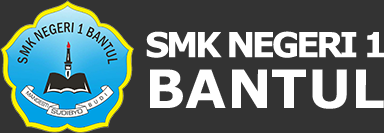
<style>
.page{position:relative;width:384px;height:133px;background:#333333}
.page>*{position:absolute;margin:0}
.t1{font:34.3px "Verdana-Bold";letter-spacing:-0.1em;color:#ffffff}
.t2{font:53px "Verdana-Bold";color:#ffffff}
</style>
<div class="page">
<p class="t1" style="left:146px;top:31px;width:239px;height:27px">SMK NEGERI 1</p>
<p class="t2" style="left:150px;top:69px;width:234px;height:40px">BANTUL</p>
</div>
